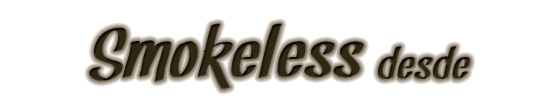
<style>
.page{position:relative;width:552px;height:112px;background:#ffffff}
.page>*{position:absolute;margin:0}
.t1{font:72px "Snickles";letter-spacing:0.025em;color:#2c2813;scale:1.2 1}
.t2{font:44px "Snickles";letter-spacing:0.025em;color:#2c2813;scale:1.2 1}
</style>
<div class="page">
<p class="t1" style="left:89px;top:23px;width:382px;height:67px">Smokeless<span class="t2"> desde</span></p>
</div>
